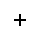
<style>
.page{position:relative;width:40px;height:40px;background:#ffffff}
.page>*{position:absolute;margin:0}
.t1{font:24px "MicrosoftYaHei";color:#000000}
</style>
<div class="page">
<p class="t1" style="left:14px;top:14px;width:12px;height:12px">+</p>
</div>
